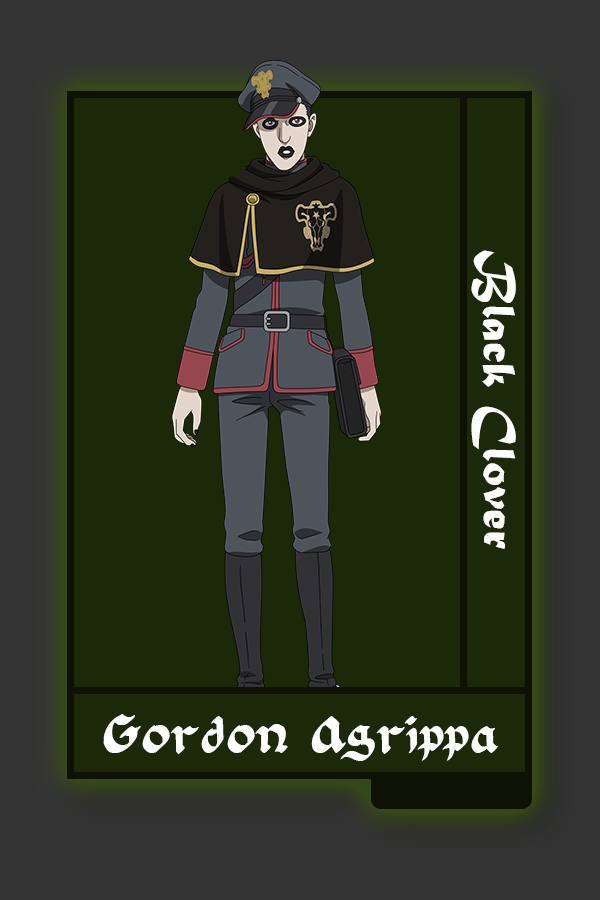
<style>
.page{position:relative;width:600px;height:900px;background:#1b2908}
.page>*{position:absolute;margin:0}
.t1{font:48.8px "MaturaMTScriptCapitals";color:#ffffff}
.t2{font:44.9px "FloranteatLaura";color:#ffffff}
</style>
<div class="page">
<p class="t1" style="left:471px;top:250px;width:45px;height:299px;rotate:90deg">Black Clover</p>
<p class="t2" style="left:103px;top:714px;width:395px;height:47px">Gordon Agrippa</p>
</div>
